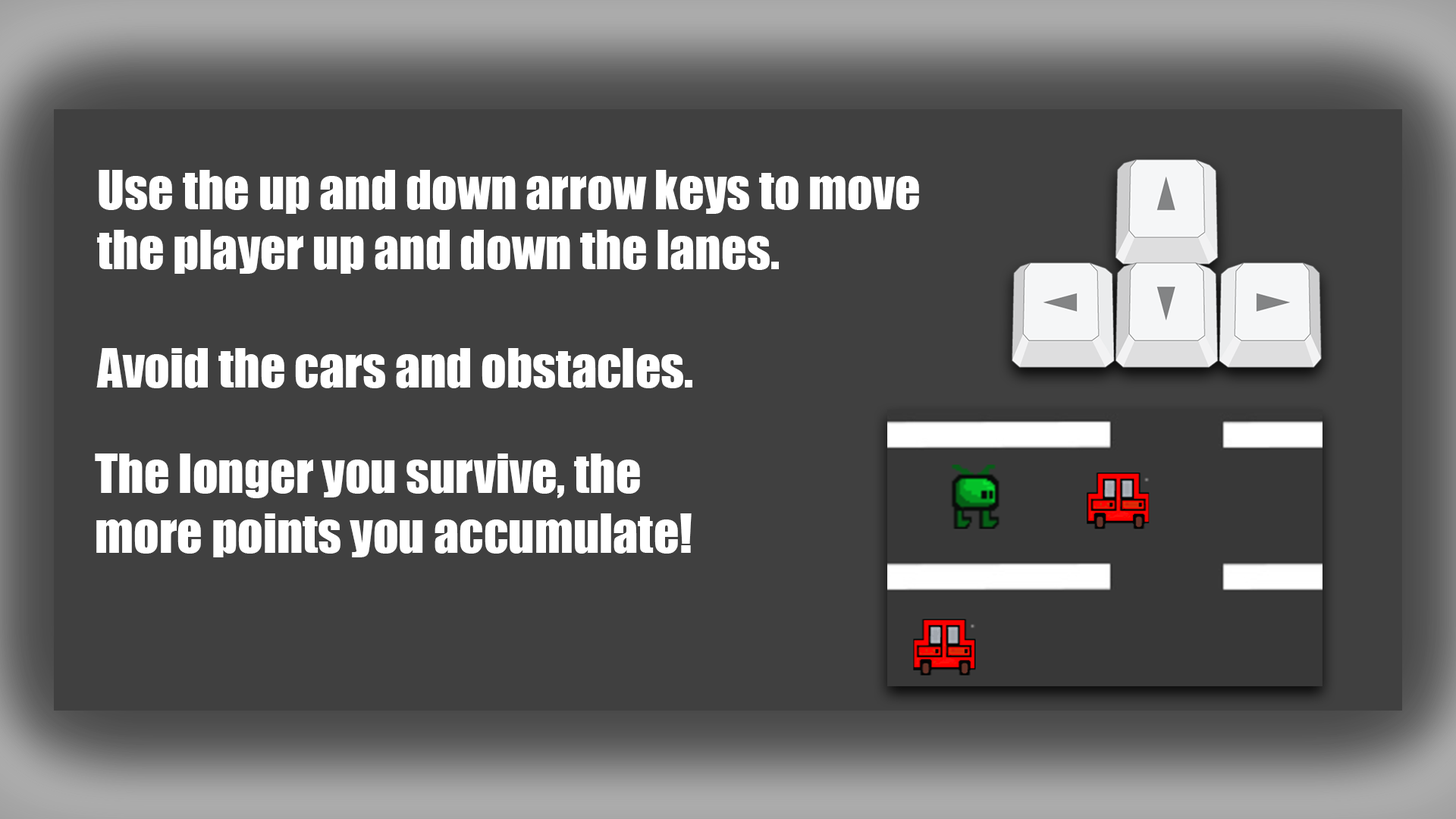
<style>
.page{position:relative;width:1456px;height:819px;background:#404040}
.page>*{position:absolute;margin:0}
.t1{font:50.1px "Impact";color:#ffffff}
</style>
<div class="page">
<p class="t1" style="left:97px;top:170px;width:822px;height:104px">Use the up and down arrow keys to move <br>the player up and down the lanes.</p>
<p class="t1" style="left:96px;top:348px;width:596px;height:40px">Avoid the cars and obstacles.</p>
<p class="t1" style="left:95px;top:453px;width:597px;height:104px">The longer you survive, the <br>more points you accumulate!</p>
</div>
